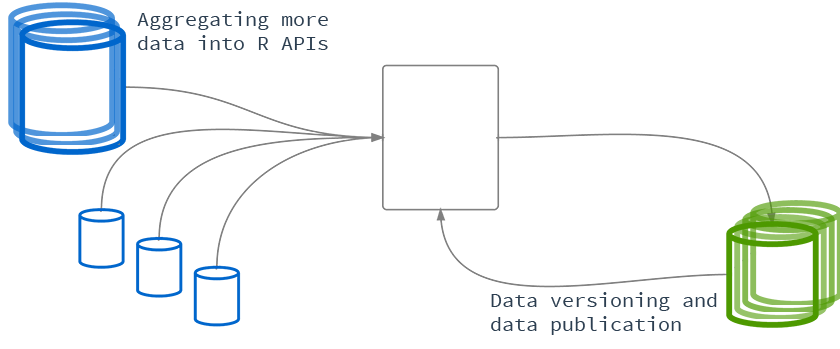
<style>
.page{position:relative;width:840px;height:349px;background:#ffffff}
.page>*{position:absolute;margin:0}
.t1{font:20px "SourceCodePro-Regular";color:#2c3e50}
</style>
<div class="page">
<p class="t1" style="left:137px;top:11px;width:191px;height:39px">Aggregating more <br>data into R APIs</p>
<p class="t1" style="left:491px;top:292px;width:226px;height:43px">Data versioning and <br>data publication</p>
</div>
